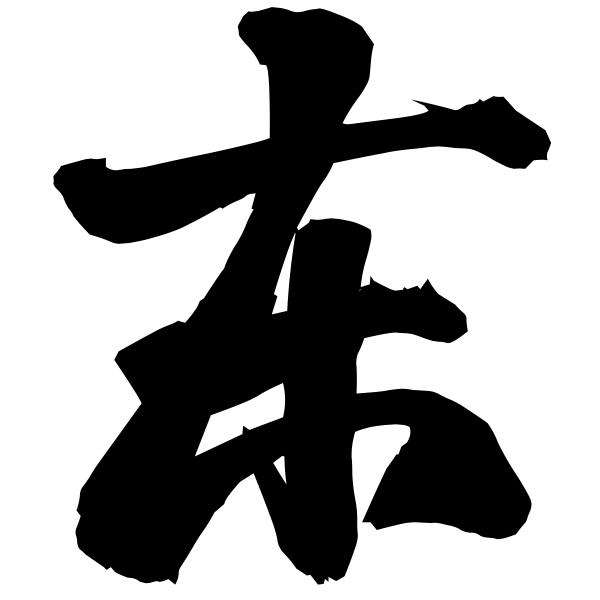
<style>
.page{position:relative;width:600px;height:600px;background:#ffffff}
.page>*{position:absolute;margin:0}
.t1{font:700px "HYChengXingJ";color:#000000}
</style>
<div class="page">
<p class="t1" style="left:53px;top:7px;width:499px;height:578px">东</p>
</div>
